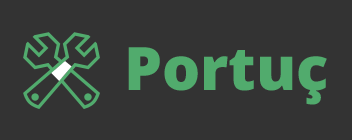
<style>
.page{position:relative;width:352px;height:140px;background:#333333}
.page>*{position:absolute;margin:0}
.t1{font:60px "OpenSans-Extrabold";color:#51ab6d}
</style>
<div class="page">
<p class="t1" style="left:128px;top:47px;width:199px;height:58px">Portuç</p>
</div>
